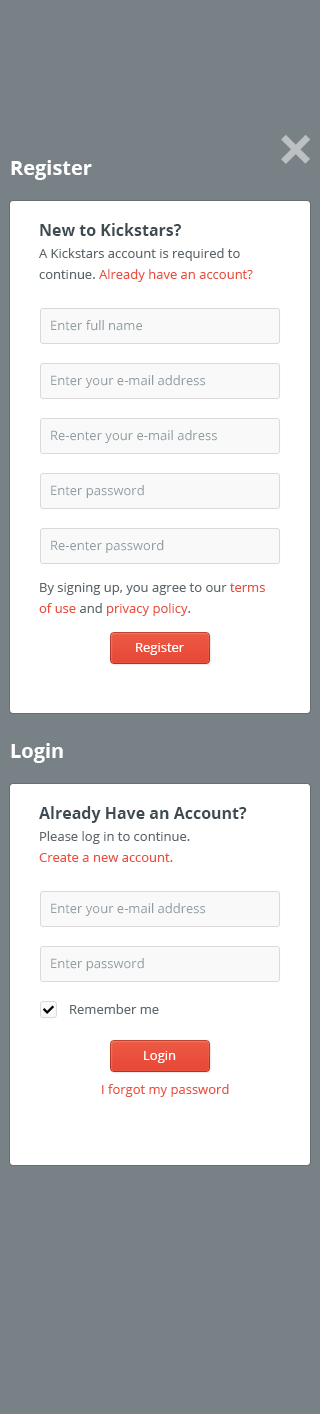
<style>
.page{position:relative;width:320px;height:1414px;background:#ffffff}
.page>*{position:absolute;margin:0}
.t1{font:20px "OpenSans-Bold";color:#ffffff}
.t2{font:16px "OpenSans-Bold";color:#3e4b51}
.t3{font:13px/21px "OpenSans";color:#5c666b}
.t4{font:13px/21px "OpenSans";color:#ea503d}
.t5{font:13px "OpenSans";color:#909da3}
.t6{font:13px "OpenSans";color:#ffffff}
.t7{font:13px "OpenSans";color:#5c666b}
.t8{font:13px "OpenSans";color:#ea503d}
</style>
<div class="page">
<p class="t1" style="left:11px;top:160px;width:81px;height:20px">Register</p>
<p class="t2" style="left:40px;top:223px;width:141px;height:13px">New to Kickstars?</p>
<p class="t3" style="left:39px;top:248px;width:214px;height:34px">A Kickstars account is required to continue. <span class="t4">Already have an account?</span></p>
<p class="t5" style="left:51px;top:320px;width:91px;height:11px">Enter full name</p>
<p class="t5" style="left:51px;top:375px;width:155px;height:13px">Enter your e-mail address</p>
<p class="t5" style="left:51px;top:430px;width:166px;height:13px">Re-enter your e-mail adress</p>
<p class="t5" style="left:51px;top:485px;width:93px;height:13px">Enter password</p>
<p class="t5" style="left:51px;top:540px;width:113px;height:13px">Re-enter password</p>
<p class="t3" style="left:39px;top:583px;width:226px;height:33px">By signing up, you agree to our <span class="t4">terms of use</span> and<span class="t4"> privacy policy</span>.</p>
<p class="t6" style="left:136px;top:643px;width:48px;height:12px">Register</p>
<p class="t1" style="left:11px;top:743px;width:52px;height:20px">Login</p>
<p class="t2" style="left:39px;top:806px;width:208px;height:17px">Already Have an Account?</p>
<p class="t3" style="left:39px;top:831px;width:151px;height:31px">Please log in to continue. <br><span class="t4">Create a new account.</span></p>
<p class="t5" style="left:51px;top:903px;width:155px;height:13px">Enter your e-mail address</p>
<p class="t5" style="left:51px;top:958px;width:93px;height:13px">Enter password</p>
<p class="t7" style="left:70px;top:1004px;width:89px;height:10px">Remember me</p>
<p class="t6" style="left:144px;top:1051px;width:32px;height:12px">Login</p>
<p class="t8" style="left:102px;top:1084px;width:127px;height:13px">I forgot my password</p>
</div>
